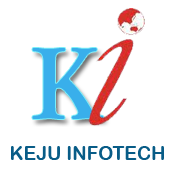
<style>
.page{position:relative;width:175px;height:175px;background:#ffffff}
.page>*{position:absolute;margin:0}
.t1{font:103.1px "PlantagenetCherokee";color:#39afeb}
.t2{font:19px "ArialRoundedMTBold";color:#085c87}
</style>
<div class="page">
<p class="t1" style="left:32px;top:48px;width:72px;height:71px">K</p>
<p class="t2" style="left:11px;top:146px;width:153px;height:14px">KEJU INFOTECH</p>
</div>
